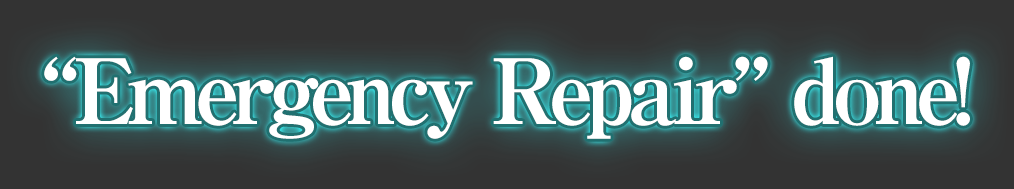
<style>
.page{position:relative;width:1014px;height:189px;background:#333333}
.page>*{position:absolute;margin:0}
.t1{font:90px "RyuminPro-ExBold";letter-spacing:-0.08em;color:#ffffff}
</style>
<div class="page">
<p class="t1" style="left:44px;top:56px;width:926px;height:83px">“Emergency Repair” done!</p>
</div>
